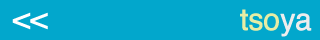
<style>
.page{position:relative;width:320px;height:40px;background:#02a7cc}
.page>*{position:absolute;margin:0}
.t1{font:30px "Helvetica";letter-spacing:-0.025em;color:#ffffff;font-weight:bold}
.t2{font:30px "Helvetica";letter-spacing:-0.025em;color:#e7eda5;font-weight:bold}
.t3{font:30px "Helvetica";letter-spacing:-0.025em;color:#ededed;font-weight:bold}
</style>
<div class="page">
<p class="t1" style="left:12px;top:12px;width:36px;height:18px">&lt;&lt;</p>
<p class="t2" style="left:240px;top:9px;width:72px;height:28px">tso<span class="t3">ya</span></p>
</div>
